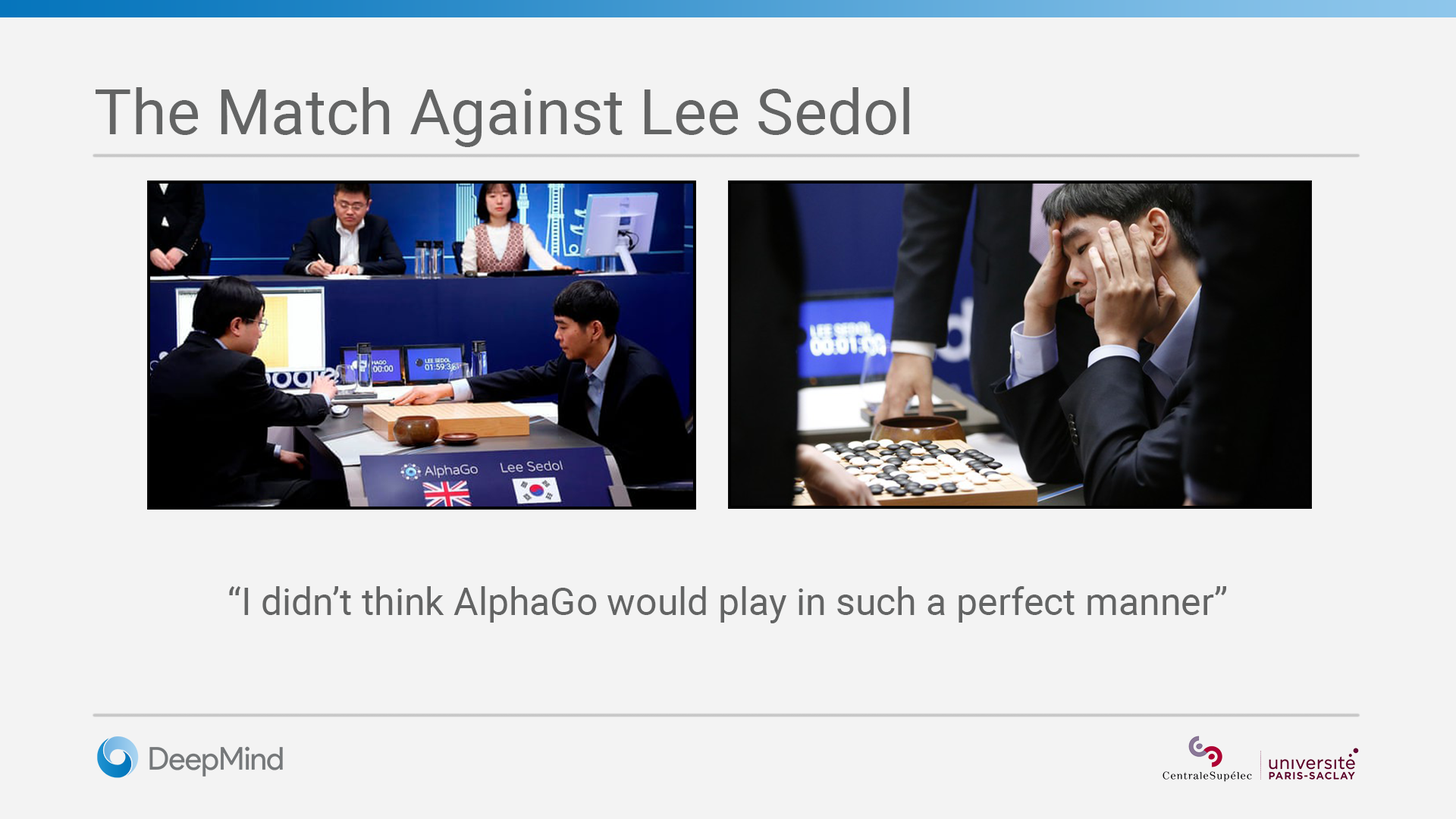
<style>
.page{position:relative;width:1456px;height:819px;background:#f3f3f3}
.page>*{position:absolute;margin:0}
.t1{font:63.2px "Roboto-Regular";color:#636464}
.t2{font:37.9px "Roboto-Regular";color:#636464}
</style>
<div class="page">
<p class="t1" style="left:96px;top:87px;width:813px;height:60px">The Match Against Lee Sedol</p>
<p class="t2" style="left:229px;top:586px;width:997px;height:37px">“I didn’t think AlphaGo would play in such a perfect manner”</p>
</div>
